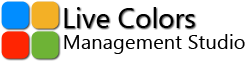
<style>
.page{position:relative;width:250px;height:63px;background:#ffffff}
.page>*{position:absolute;margin:0}
.t1{font:27.9px "MicrosoftNewTaiLue";color:#000000}
.t2{font:20.3px "MicrosoftNewTaiLue";color:#000000}
</style>
<div class="page">
<p class="t1" style="left:64px;top:7px;width:131px;height:21px">Live Colors</p>
<p class="t2" style="left:64px;top:34px;width:181px;height:20px">Management Studio</p>
</div>
